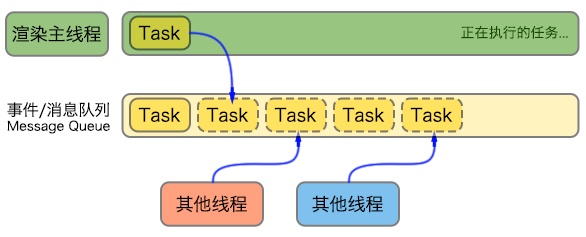
<style>
.page{position:relative;width:586px;height:237px;background:#ffffff}
.page>*{position:absolute;margin:0}
.t1{font:18px "HiraginoSansGB-W3";color:#000000}
.t2{font:14px "HiraginoSansGB-W3";color:#194702}
.t3{font:16px "HiraginoSansGB-W3";color:#000000}
.t4{font:13px "HiraginoSansGB-W3";color:#000000}
</style>
<div class="page">
<p class="t1" style="left:12px;top:25px;width:89px;height:18px">渲染主线程</p>
<p class="t1" style="left:138px;top:25px;width:43px;height:15px">Task</p>
<p class="t2" style="left:461px;top:25px;width:107px;height:14px">正在执行的任务...</p>
<p class="t3" style="left:7px;top:102px;width:102px;height:17px">事件/消息队列</p>
<p class="t1" style="left:138px;top:107px;width:43px;height:15px">Task</p>
<p class="t1" style="left:206px;top:107px;width:43px;height:15px">Task</p>
<p class="t1" style="left:274px;top:107px;width:43px;height:15px">Task</p>
<p class="t1" style="left:342px;top:107px;width:43px;height:15px">Task</p>
<p class="t1" style="left:410px;top:107px;width:43px;height:15px">Task</p>
<p class="t4" style="left:7px;top:120px;width:103px;height:14px">Message Queue</p>
<p class="t1" style="left:176px;top:195px;width:71px;height:18px">其他线程</p>
<p class="t1" style="left:312px;top:195px;width:71px;height:18px">其他线程</p>
</div>
